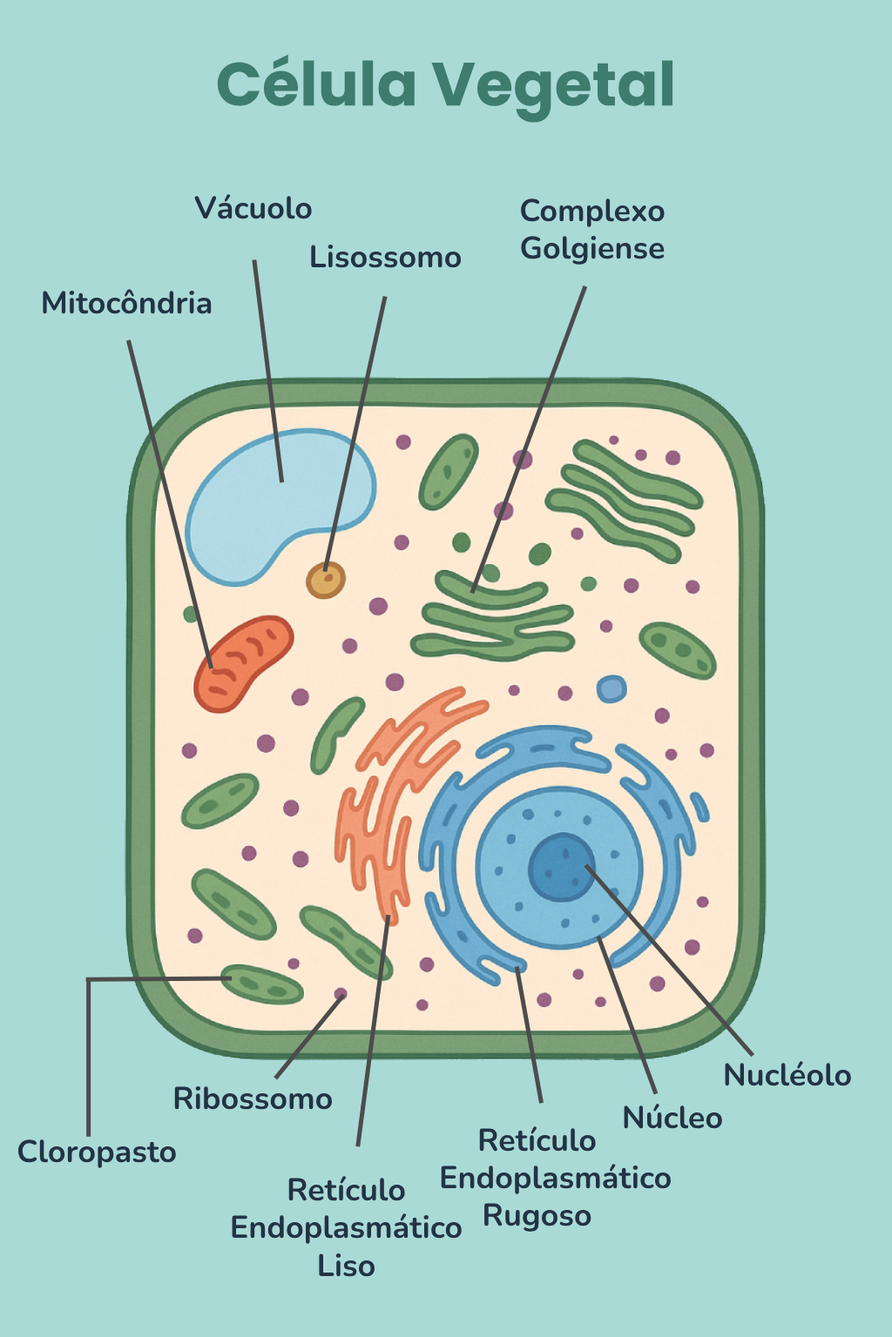
<style>
.page{position:relative;width:892px;height:1337px;background:#aadad6}
.page>*{position:absolute;margin:0}
.t1{font:60.9px "Poppins-Bold";color:#3e7c6d}
.t2{font:31.3px "Nunito-Bold";color:#223344}
</style>
<div class="page">
<p class="t1" style="left:217px;top:54px;width:456px;height:69px">Célula Vegetal</p>
<p class="t2" style="left:194px;top:194px;width:118px;height:25px">Vácuolo</p>
<p class="t2" style="left:521px;top:199px;width:143px;height:66px;text-align:center">Complexo Golgiense</p>
<p class="t2" style="left:311px;top:245px;width:150px;height:23px">Lisossomo</p>
<p class="t2" style="left:43px;top:289px;width:169px;height:25px">Mitocôndria</p>
<p class="t2" style="left:724px;top:1061px;width:127px;height:26px">Nucléolo</p>
<p class="t2" style="left:174px;top:1087px;width:159px;height:23px">Ribossomo</p>
<p class="t2" style="left:623px;top:1103px;width:99px;height:26px">Núcleo</p>
<p class="t2" style="left:441px;top:1127px;width:229px;height:105px;text-align:center">Retículo Endoplasmático<br>Rugoso</p>
<p class="t2" style="left:17px;top:1140px;width:159px;height:28px">Cloropasto</p>
<p class="t2" style="left:232px;top:1176px;width:229px;height:101px;text-align:center">Retículo Endoplasmático Liso</p>
</div>
